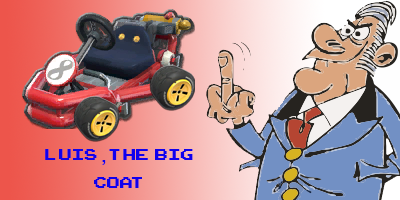
<style>
.page{position:relative;width:400px;height:200px}
.page>*{position:absolute;margin:0}
.t1{font:23.5px "ArcadeClassic";color:#1100ed}
.t2{font:23.5px "Helvetica";color:#1100ed}
</style>
<div class="page">
<p class="t1" style="left:45px;top:149px;width:148px;height:39px;text-align:center">LUIS <span class="t2">,</span> THE  BIG<br>COAT</p>
</div>
